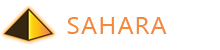
<style>
.page{position:relative;width:220px;height:50px;background:#ffffff}
.page>*{position:absolute;margin:0}
.t1{font:24px "SegoeUI";letter-spacing:0.04em;color:#f4883f;scale:1.05 1}
</style>
<div class="page">
<p class="t1" style="left:67px;top:17px;width:100px;height:17px">SAHARA</p>
</div>
